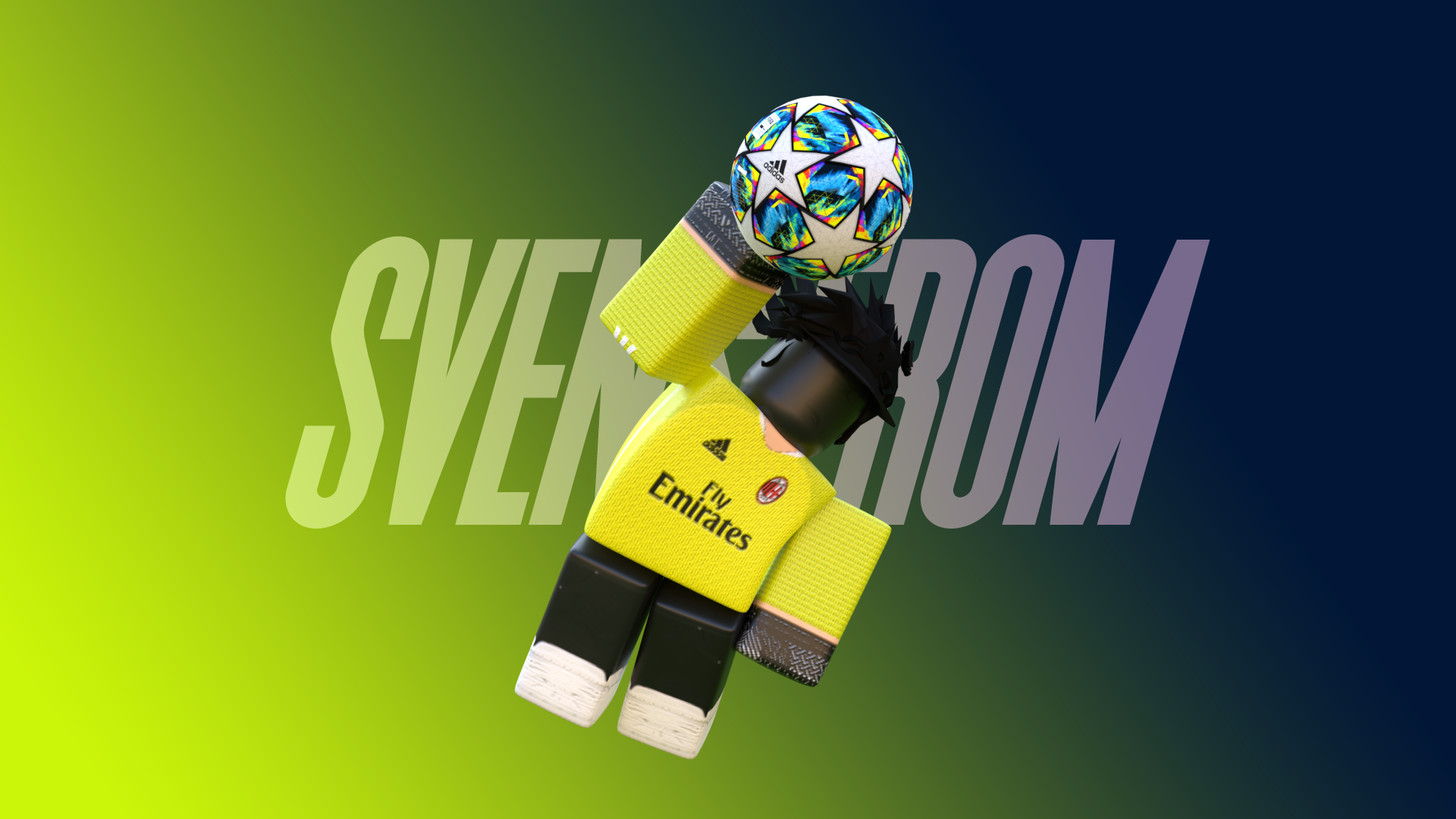
<style>
.page{position:relative;width:1456px;height:819px}
.page>*{position:absolute;margin:0}
.t1{font:407.2px "ForeverFreedomItalic-Regular";font-style:italic}
</style>
<div class="page">
<p class="t1" style="left:285px;top:234px;width:925px;height:295px">svenstrom</p>
</div>
